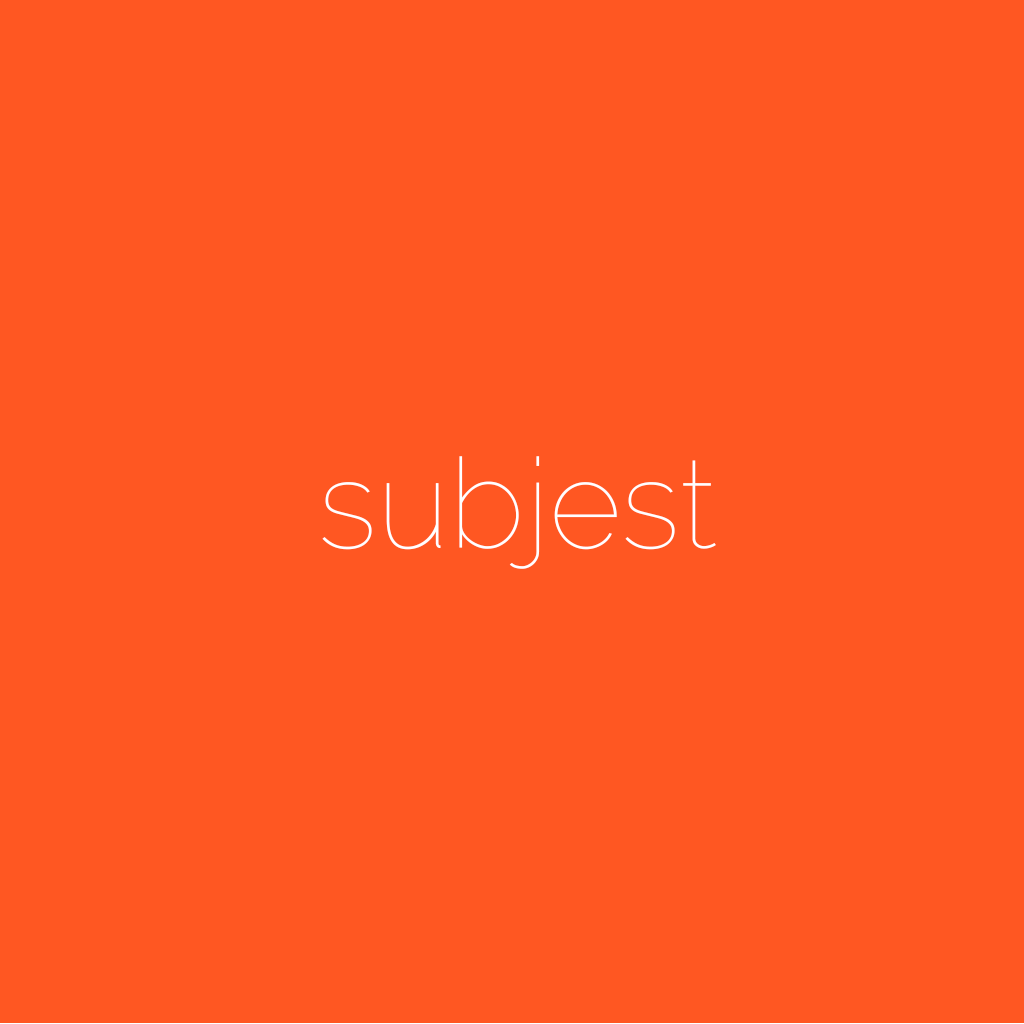
<style>
.page{position:relative;width:1024px;height:1024px;background:#ff5722}
.page>*{position:absolute;margin:0}
.t1{font:125px "Raleway-Thin";color:#ffffff}
</style>
<div class="page">
<p class="t1" style="left:322px;top:456px;width:394px;height:113px">subjest</p>
</div>
